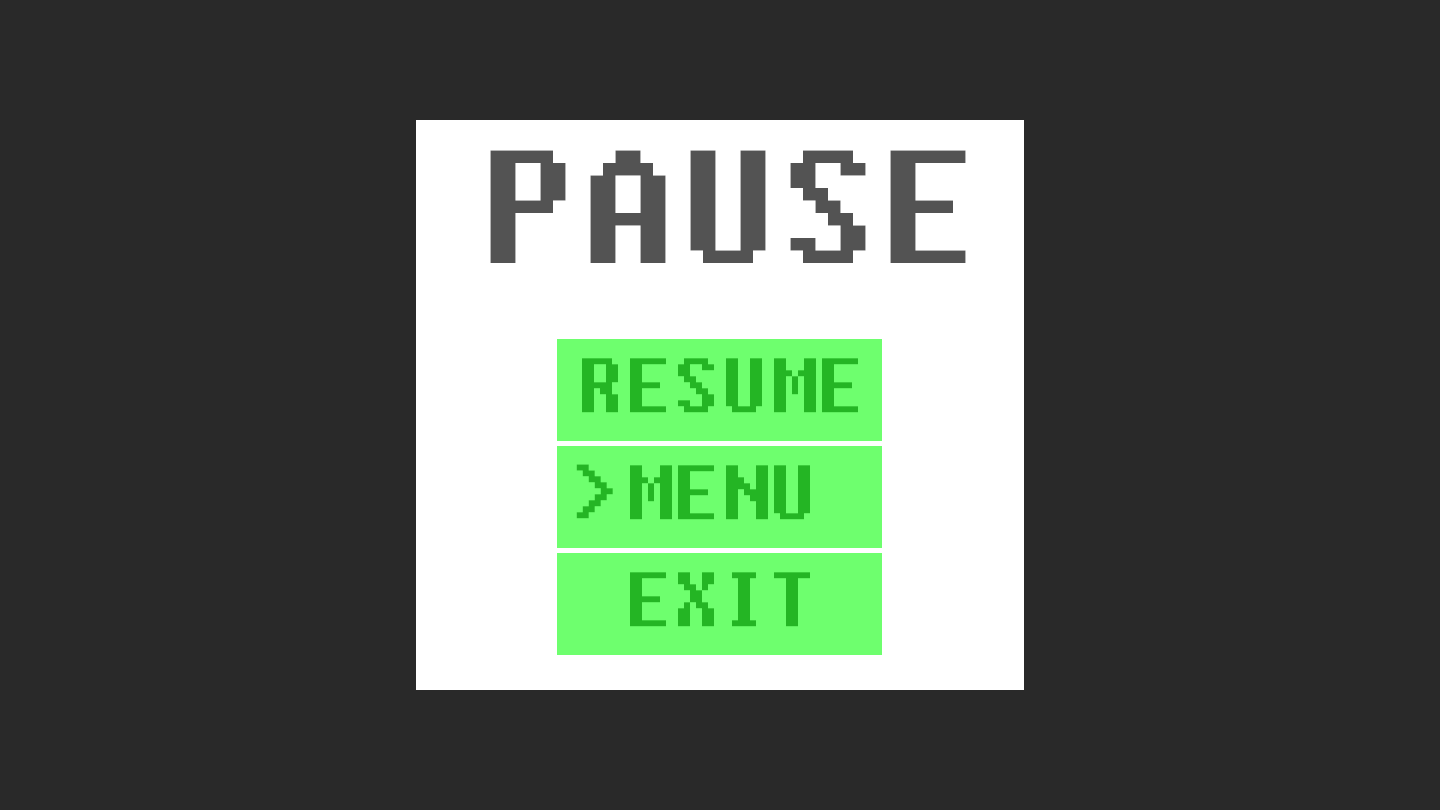
<style>
.page{position:relative;width:1440px;height:810px;background:#292929}
.page>*{position:absolute;margin:0}
.t1{font:200px "Fixedsys";color:#535353}
.t2{font:96px "Fixedsys";color:#24b524}
.t3{font:95.8px "Fixedsys";color:#24b524}
</style>
<div class="page">
<p class="t1" style="left:490px;top:150px;width:476px;height:113px">PAUSE</p>
<p class="t2" style="left:582px;top:358px;width:276px;height:55px">RESUME</p>
<p class="t3" style="left:576px;top:464px;width:37px;height:55px">&gt;</p>
<p class="t2" style="left:630px;top:465px;width:180px;height:55px">MENU</p>
<p class="t2" style="left:630px;top:572px;width:180px;height:55px">EXIT</p>
</div>
